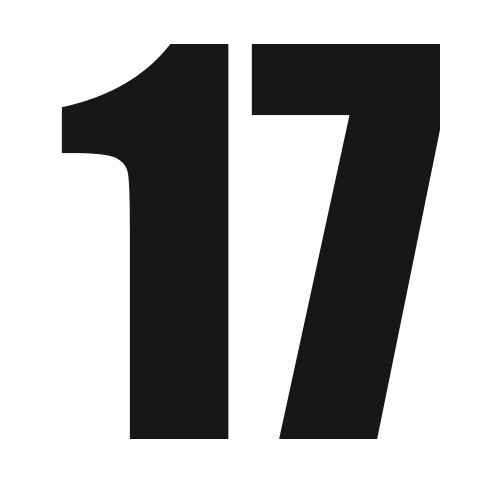
<style>
.page{position:relative;width:480px;height:480px;background:#ffffff}
.page>*{position:absolute;margin:0}
.t1{font:500px "Impact";color:#171717}
</style>
<div class="page">
<p class="t1" style="left:61px;top:44px;width:379px;height:395px">17</p>
</div>
